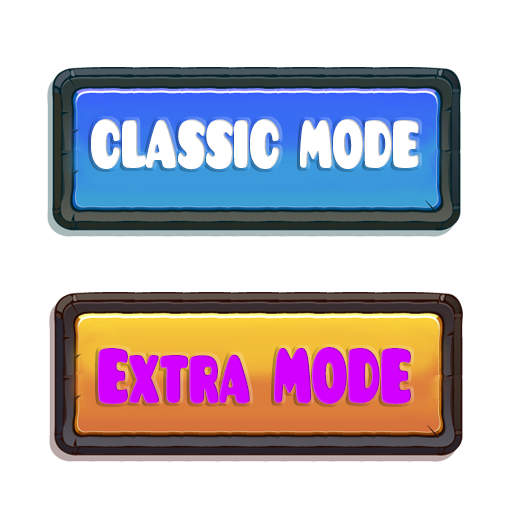
<style>
.page{position:relative;width:512px;height:512px;background:#ffffff}
.page>*{position:absolute;margin:0}
.t1{font:73.8px "Pusab";letter-spacing:-0.02em;color:#ffffff;scale:0.6 1}
.t2{font:84.9px "Pusab";letter-spacing:-0.02em;color:#d200ff;scale:0.6 1}
</style>
<div class="page">
<p class="t1" style="left:91px;top:119px;width:328px;height:51px">CLASSIC MODE</p>
<p class="t2" style="left:98px;top:347px;width:313px;height:57px">Extra MODE</p>
</div>
